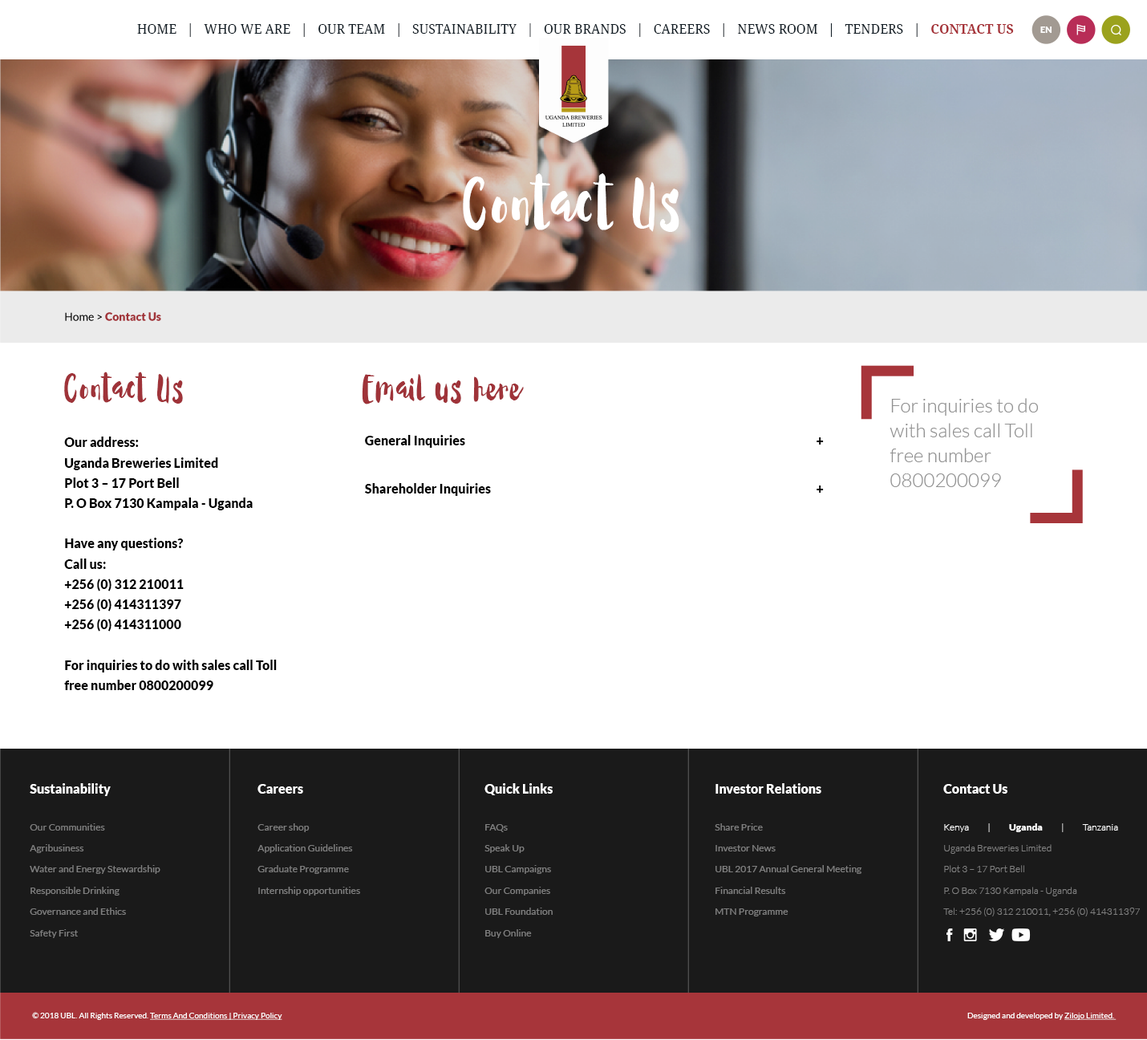
<style>
.page{position:relative;width:1147px;height:1040px;background:#ffffff}
.page>*{position:absolute;margin:0}
.t1{font:12.8px "DroidSerif";color:#152028;text-transform:uppercase}
.t2{font:12.8px "DroidSerif-Bold";color:#a73439;text-transform:uppercase}
.t3{font:8.8px "Lato-Black";color:#ffffff}
.t4{font:60.1px "CandyRose";letter-spacing:0.04em;color:#ffffff}
.t5{font:32.8px "CandyRose";letter-spacing:0.04em;color:#a03439}
.t6{font:19.3px/25px "Lato-Light";color:#929292}
.t7{font:12.8px/20.2px "Lato-Black";color:#000000}
.t8{font:12.8px/48.1px "Lato-Black";color:#000000}
.t9{font:9.6px/21.2px "Lato-Regular";color:#808080}
.t10{font:12.8px "Lato-Black";color:#ffffff}
.t11{font:9.6px/21.2px "Lato-Light";color:#808080}
.t12{font:9.6px/21.2px "Lato-Light";color:#ffffff}
.t13{font:9.6px/21.2px "Lato-Black";color:#ffffff}
.t14{font:8px "Lato-Regular";color:#ffffff;text-decoration:underline}
.t15{font:8px "Lato-Regular";color:#ffffff}
</style>
<div class="page">
<p class="t1" style="left:137px;top:23px;width:877px;height:14px">HOME   |   WHO WE ARE   |   OUR TEAM   |   SUSTAINABILITY   |   OUR BRANDS   |   CAREERS   |   NEWS ROOM   |   TENDERS   |  <span class="t2"> CONTACT US</span></p>
<p class="t3" style="left:1040px;top:26px;width:12px;height:7px">EN</p>
<p class="t4" style="left:463px;top:173px;width:216px;height:59px">Contact Us</p>
<p class="t5" style="left:64px;top:371px;width:119px;height:32px">Contact Us</p>
<p class="t5" style="left:362px;top:374px;width:162px;height:30px">Email us here</p>
<p class="t6" style="left:890px;top:398px;width:148px;height:89px">For inquiries to do with sales call Toll free number 0800200099</p>
<p class="t7" style="left:64px;top:436px;width:213px;height:254px">Our address:<br>Uganda Breweries Limited<br>Plot 3 – 17 Port Bell<br>P. O Box 7130 Kampala - Uganda<br><br>Have any questions?<br>Call us:<br>+256 (0) 312 210011<br>+256 (0) 414311397<br>+256 (0) 414311000<br><br>For inquiries to do with sales call Toll free number 0800200099</p>
<p class="t8" style="left:365px;top:435px;width:126px;height:61px">General Inquiries<br>Shareholder Inquiries</p>
<p class="t8" style="left:817px;top:437px;width:7px;height:56px">+<br>+</p>
<p class="t9" style="left:30px;top:783px;width:130px;height:155px"><span class="t10">Sustainability<br><br></span>Our Communities <br>Agribusiness<br>Water and Energy Stewardship<br>Responsible Drinking<br>Governance and Ethics<br>Safety First</p>
<p class="t9" style="left:257px;top:784px;width:103px;height:111px"><span class="t10">Careers<br><br></span>Career shop<br>Application Guidelines<br>Graduate Programme<br>Internship opportunities</p>
<p class="t9" style="left:484px;top:783px;width:69px;height:155px"><span class="t10">Quick Links<br><br></span>FAQs<br>Speak Up<br>UBL Campaigns<br>Our Companies<br>UBL Foundation<br>Buy Online</p>
<p class="t9" style="left:715px;top:783px;width:147px;height:133px"><span class="t10">Investor Relations<br><br></span>Share Price<br>Investor News<br>UBL 2017 Annual General Meeting<br>Financial Results<br>MTN Programme</p>
<p class="t11" style="left:943px;top:784px;width:197px;height:132px"><span class="t10">Contact Us<br><br></span><span class="t12">Kenya          |          </span><span class="t13">Uganda          </span><span class="t12">|          Tanzania<br></span>Uganda Breweries Limited<br>Plot 3 – 17 Port Bell<br>P. O Box 7130 Kampala - Uganda<br>Tel: +256 (0) 312 210011, +256 (0) 414311397</p>
<p class="t14" style="left:32px;top:1011px;width:250px;height:9px"><span class="t15">© 2018 UBL. All Rights Reserved. </span>Terms And Conditions | Privacy Policy</p>
<p class="t15" style="left:967px;top:1012px;width:150px;height:8px">Designed and developed by <span class="t14">Zilojo Limited.</span></p>
</div>
